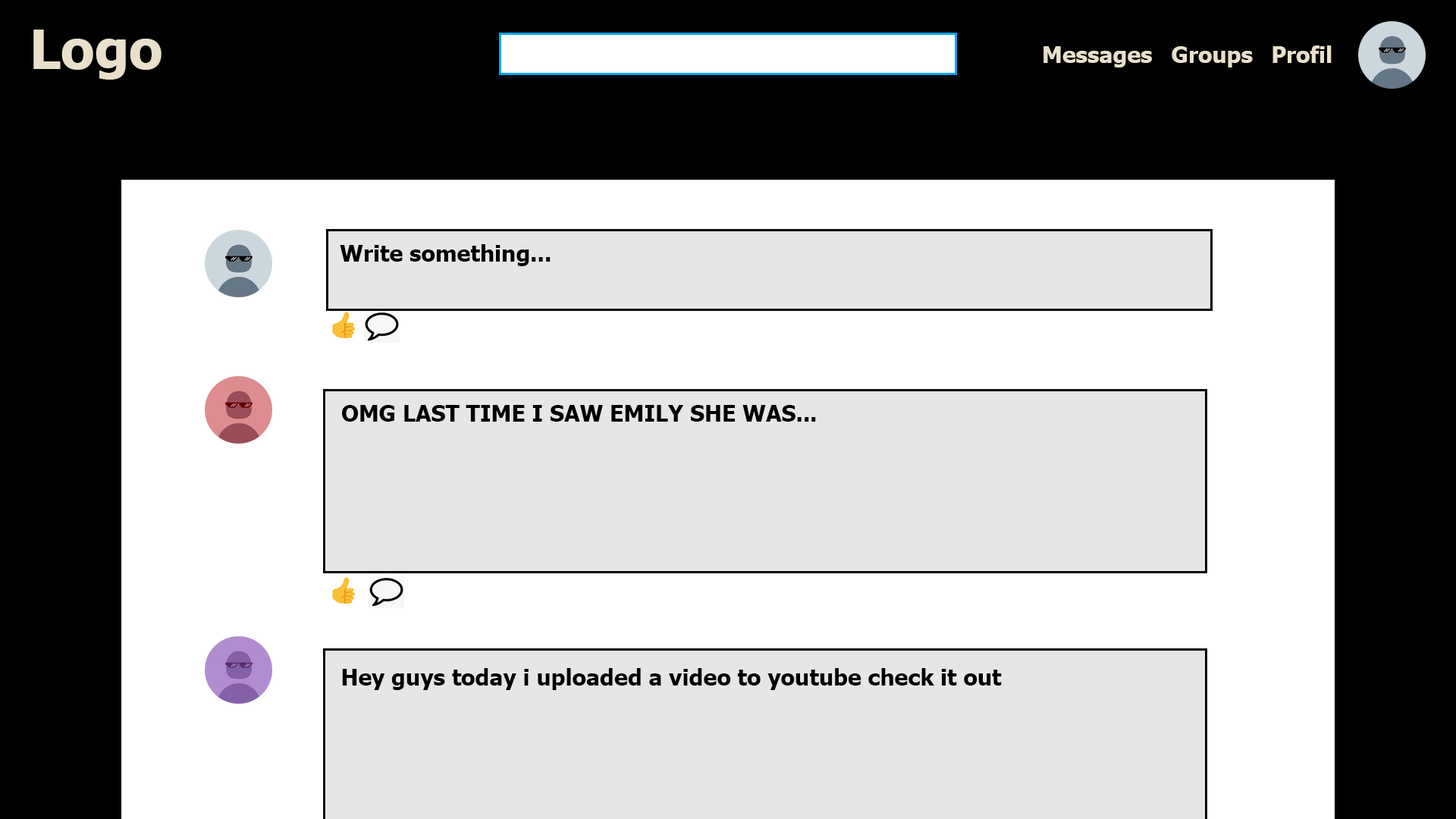
<style>
.page{position:relative;width:1456px;height:819px;background:#000000}
.page>*{position:absolute;margin:0}
.t1{font:54.6px "Tahoma-Bold";color:#e8e0cb}
.t2{font:22.7px "Tahoma-Bold";color:#e8e0cb}
.t3{font:22.7px "Tahoma-Bold";color:#000000}
</style>
<div class="page">
<p class="t1" style="left:33px;top:30px;width:129px;height:50px">Logo</p>
<p class="t2" style="left:1043px;top:46px;width:109px;height:21px">Messages</p>
<p class="t2" style="left:1172px;top:46px;width:81px;height:21px">Groups</p>
<p class="t2" style="left:1272px;top:45px;width:60px;height:18px">Profil</p>
<p class="t3" style="left:340px;top:244px;width:211px;height:22px">Write something...</p>
<p class="t3" style="left:342px;top:405px;width:474px;height:17px">OMG LAST TIME I SAW EMILY SHE WAS...</p>
<p class="t3" style="left:342px;top:668px;width:660px;height:22px">Hey guys today i uploaded a video to youtube check it out</p>
</div>
